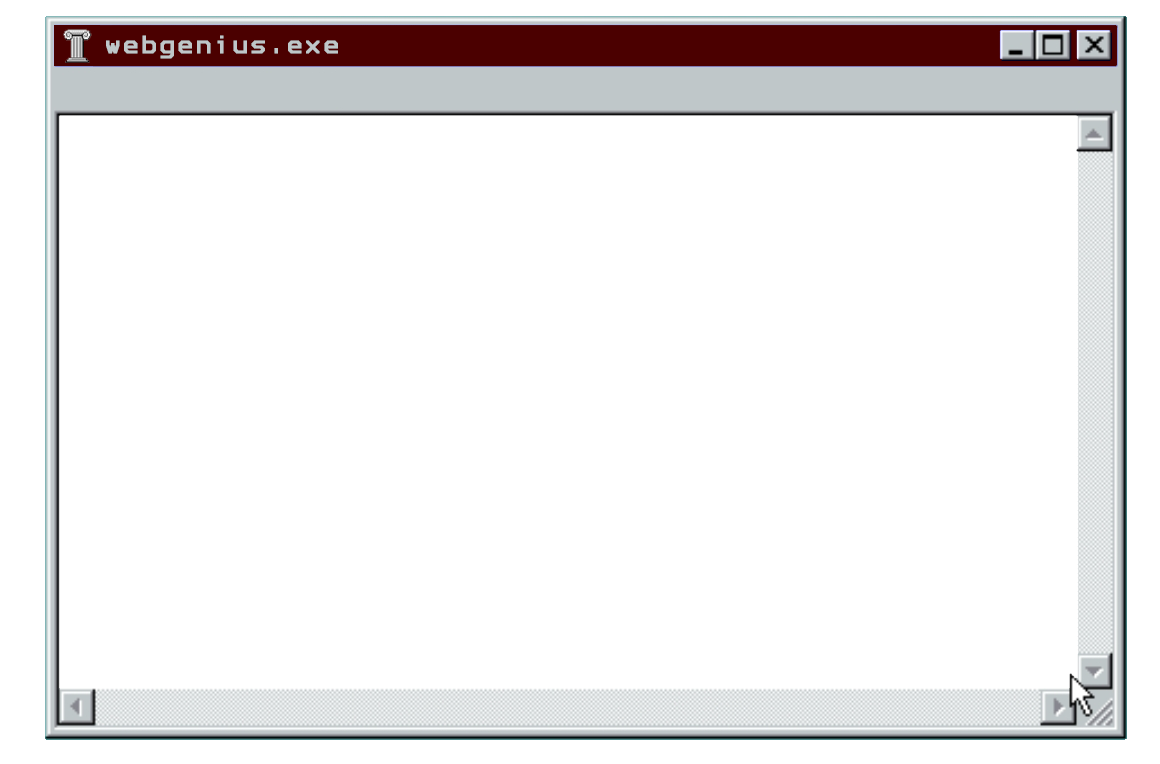
<style>
.page{position:relative;width:1160px;height:764px;background:#ffffff}
.page>*{position:absolute;margin:0}
.t1{font:30px "CatV_6x12_9";letter-spacing:0.08em;color:#bfc7c9;font-weight:bold}
</style>
<div class="page">
<p class="t1" style="left:106px;top:35px;width:232px;height:24px">webgenius.exe</p>
</div>
